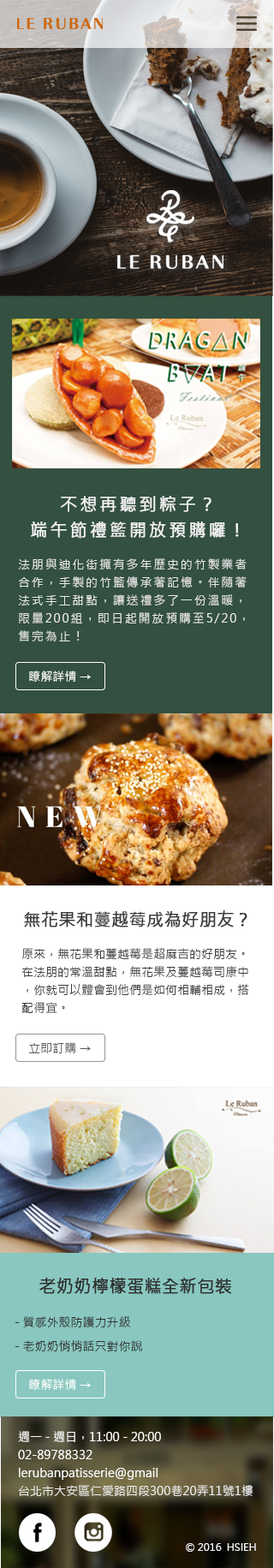
<style>
.page{position:relative;width:274px;height:1568px}
.page>*{position:absolute;margin:0}
.t1{font:17.1px/25.7px "MicrosoftJhengHeiRegular";letter-spacing:0.13em;color:#f1f1f1;font-weight:bold}
.t2{font:12px/18px "MicrosoftJhengHeiRegular";letter-spacing:0.13em;color:#eaeaea}
.t3{font:12px "MicrosoftJhengHeiRegular";color:#ffffff}
.t4{font:17.1px "MicrosoftJhengHeiRegular";color:#3b3b3b;font-weight:bold}
.t5{font:12px/18px "MicrosoftJhengHeiRegular";color:#3b3b3b}
.t6{font:12px "MicrosoftJhengHeiRegular";color:#5b5b5b}
.t7{font:17.1px "MicrosoftJhengHeiRegular";color:#2f2f2f;font-weight:bold}
.t8{font:12px/24px "MicrosoftJhengHeiRegular";color:#333333}
.t9{font:12px/18px "MicrosoftJhengHeiRegular";color:#ffffff}
.t10{font:12px/18px "MicrosoftJhengHeiRegular";color:#ececec}
.t11{font:10.3px "MicrosoftJhengHeiRegular";color:#f7f7f7}
</style>
<div class="page">
<p class="t1" style="left:31px;top:496px;width:208px;height:43px;text-align:center">不想再聽到粽子？<br>端午節禮籃開放預購囉！</p>
<p class="t2" style="left:18px;top:558px;width:229px;height:83px">法朋與迪化街擁有多年歷史的竹製業者<br>合作，手製的竹籃傳承著記憶。伴隨著<br>法式手工甜點，讓送禮多了一份溫暖，<br>限量200組，即日起開放預購至5/20，<br>售完為止！</p>
<p class="t3" style="left:29px;top:671px;width:62px;height:11px">瞭解詳情 →</p>
<p class="t4" style="left:24px;top:910px;width:223px;height:17px">無花果和蔓越莓成為好朋友？</p>
<p class="t5" style="left:21px;top:948px;width:228px;height:65px">原來，無花果和蔓越莓是超麻吉的好朋友。<br>在法朋的常溫甜點，無花果及蔓越莓司康中<br>，你就可以體會到他們是如何相輔相成，搭<br>配得宜。</p>
<p class="t6" style="left:29px;top:1042px;width:62px;height:11px">立即訂購 →</p>
<p class="t7" style="left:39px;top:1278px;width:192px;height:17px">老奶奶檸檬蛋糕全新包裝</p>
<p class="t8" style="left:15px;top:1316px;width:128px;height:35px">- 質感外殼防護力升級<br>- 老奶奶悄悄話只對你說</p>
<p class="t3" style="left:29px;top:1379px;width:62px;height:11px">瞭解詳情 →</p>
<p class="t9" style="left:18px;top:1431px;width:235px;height:65px">週一 - 週日，11:00 - 20:00<br>02-89788332<br>lerubanpatisserie@gmail<br><span class="t10">台北市大安區仁愛路四段300巷20弄11號1樓</span></p>
<p class="t11" style="left:186px;top:1543px;width:70px;height:9px">© 2016  HSIEH</p>
</div>
